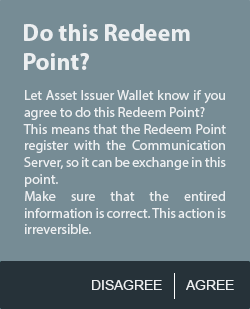
<style>
.page{position:relative;width:250px;height:309px;background:#768c95}
.page>*{position:absolute;margin:0}
.t1{font:24px "MyriadPro-Bold";color:#eceff1}
.t2{font:14px "MyriadPro-Regular";color:#eceff1}
.t3{font:14px "ArialMT";color:#eceff1}
</style>
<div class="page">
<p class="t1" style="left:24px;top:24px;width:166px;height:46px">Do this Redeem Point?</p>
<p class="t2" style="left:23px;top:90px;width:203px;height:144px;text-align:justify">Let Asset Issuer Wallet know if you agree to do this Redeem Point? <br>This means that the Redeem Point register with the Communication Server, so it can be exchange in this point.<br>Make sure that the entired information is correct. This action is irreversible.</p>
<p class="t3" style="left:92px;top:280px;width:70px;height:10px">DISAGREE</p>
<p class="t3" style="left:186px;top:280px;width:48px;height:10px">AGREE</p>
</div>
